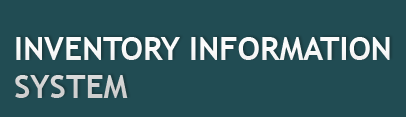
<style>
.page{position:relative;width:406px;height:117px;background:#214c53}
.page>*{position:absolute;margin:0}
.t1{font:31.8px "TrebuchetMS-Bold";color:#f9f9f9}
</style>
<div class="page">
<p class="t1" style="left:15px;top:37px;width:375px;height:61px">INVENTORY INFORMATION<br>SYSTEM</p>
</div>
